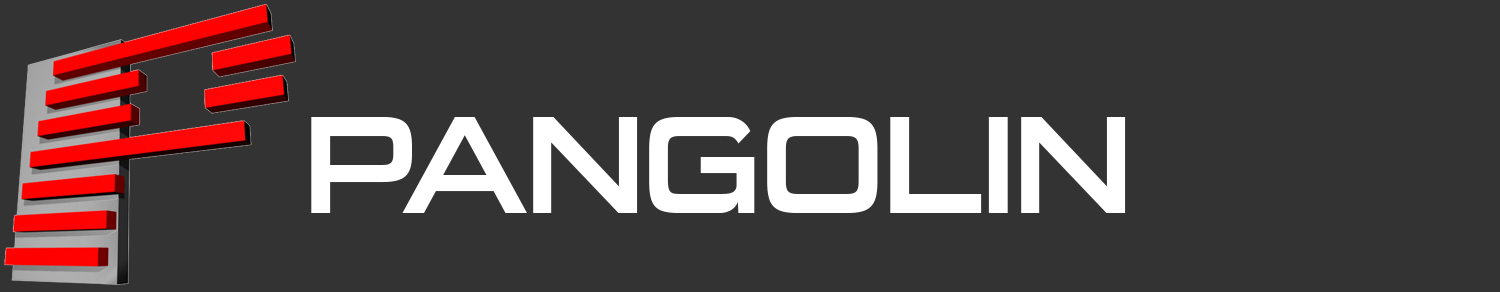
<style>
.page{position:relative;width:1500px;height:292px;background:#333333}
.page>*{position:absolute;margin:0}
.t1{font:140px "SuiGenerisRg-Regular";letter-spacing:-0.024em;color:#ffffff}
</style>
<div class="page">
<p class="t1" style="left:311px;top:117px;width:815px;height:96px">PANGOLIN</p>
</div>
